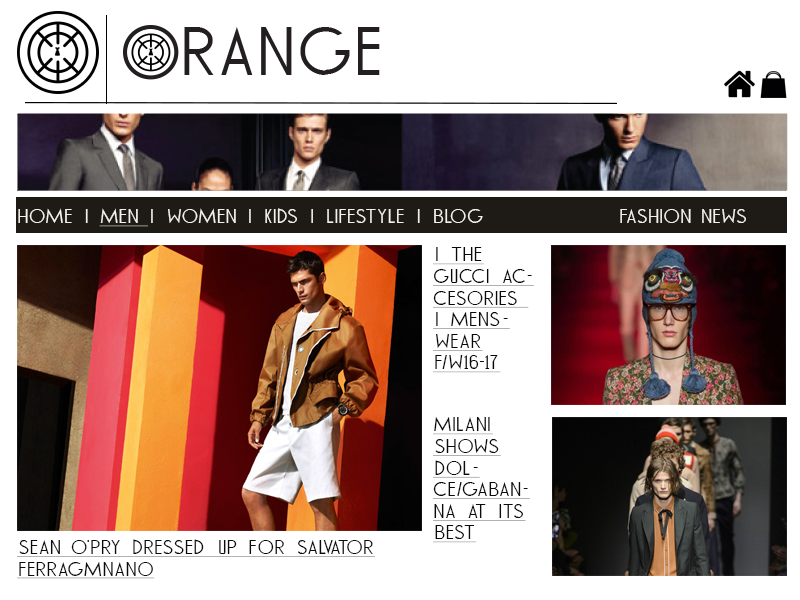
<style>
.page{position:relative;width:800px;height:600px;background:#ffffff}
.page>*{position:absolute;margin:0}
.t1{font:18px "TOMMYHILFIGERAF";color:#f5f0ea}
.t2{font:18px "TOMMYHILFIGERAF";color:#f5f0ea;text-decoration:underline}
.t3{font:18px "TOMMYHILFIGERAF";color:#090909;text-decoration:underline}
.t4{font:18px "TOMMYHILFIGERAF";color:#0b0b0b;text-decoration:underline}
</style>
<div class="page">
<p class="t1" style="left:18px;top:208px;width:728px;height:19px">HOME | <span class="t2">MEN </span>| WOMEN | KIDS | LIfestyle | BLOG               FASHION NEWS</p>
<p class="t3" style="left:433px;top:247px;width:101px;height:126px">| The guccI accesories <br>| menswear f/w16-17</p>
<p class="t4" style="left:433px;top:417px;width:97px;height:126px">milan| shows dolce/gabanna at its best</p>
<p class="t4" style="left:17px;top:539px;width:358px;height:40px">Sean O'pry dressed up for salvator ferragmnano</p>
</div>
